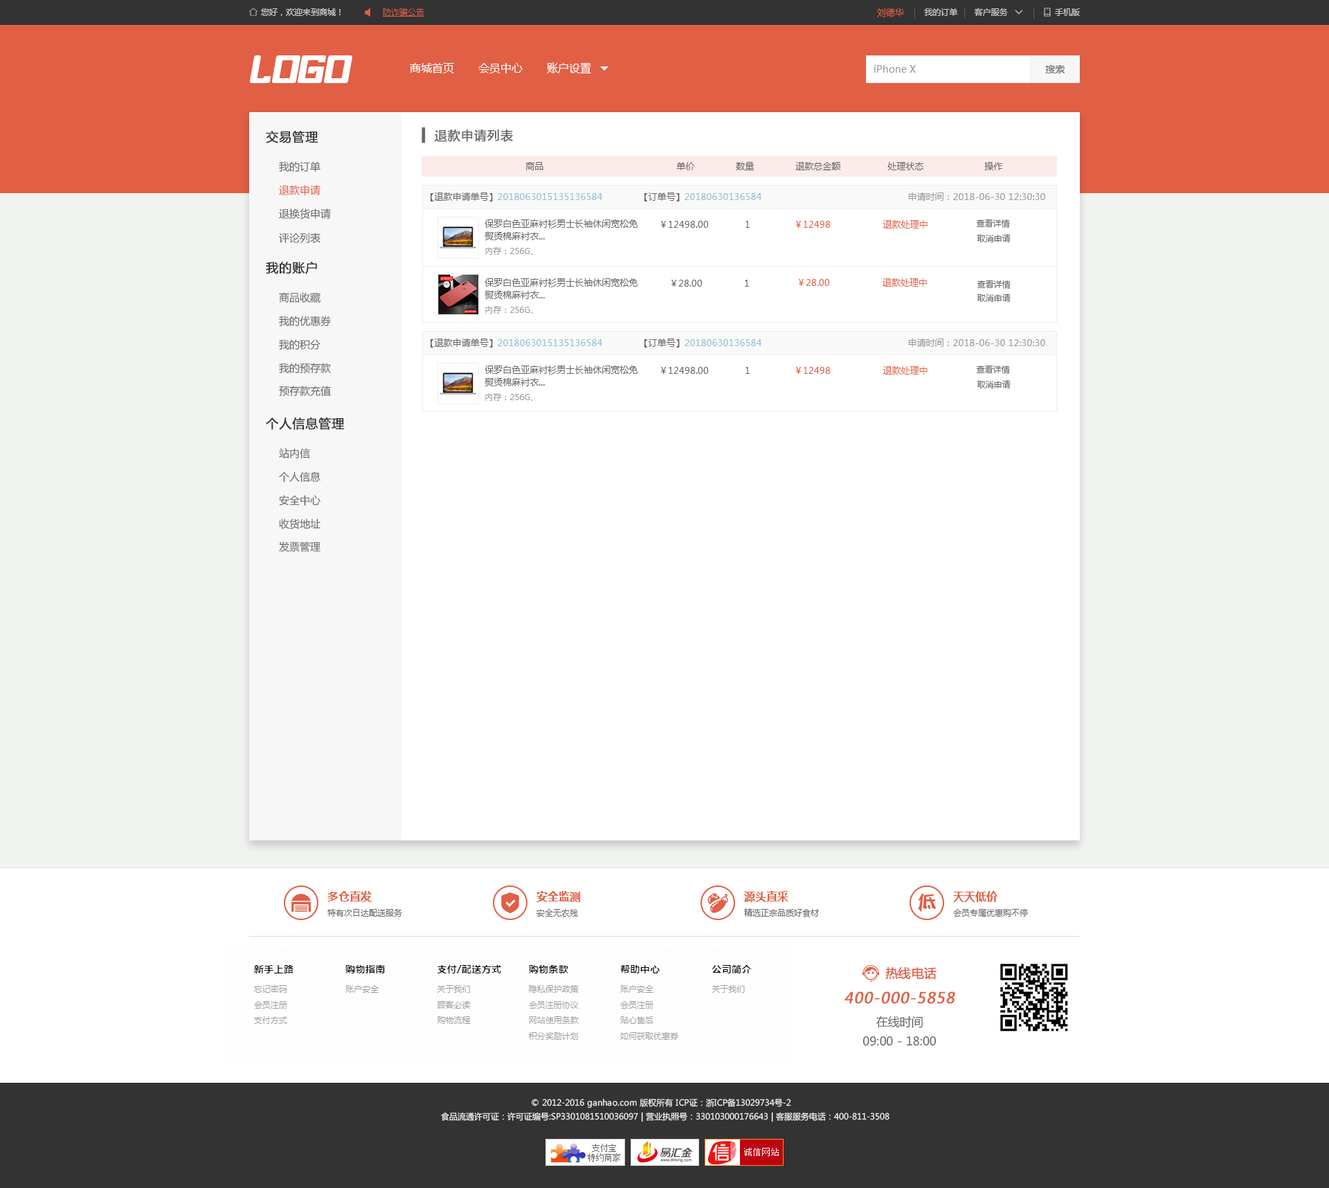
<style>
.page{position:relative;width:1329px;height:1188px;background:#ffffff}
.page>*{position:absolute;margin:0}
.t1{font:9px "MicrosoftYaHei";color:#e15f45}
.t2{font:11.1px "MicrosoftYaHei";color:#ffffff}
.t3{font:9.7px "MicrosoftYaHei";color:#999999}
.t4{font:9.7px "MicrosoftYaHei";color:#666666}
.t5{font:12.5px "MicrosoftYaHei";color:#333333;font-weight:bold}
.t6{font:12.5px "MicrosoftYaHei";color:#666666;font-weight:bold}
.t7{font:10.4px "MicrosoftYaHei";color:#666666}
.t8{font:9px "MicrosoftYaHei";color:#666666}
.t9{font:10.4px "MicrosoftYaHei";color:#e15f45}
.t10{font:9px "MicrosoftYaHei";color:#8fc0d5}
.t11{font:9px "MicrosoftYaHei";color:#999999}
.t12{font:9px/12.5px "MicrosoftYaHei";color:#666666}
.t13{font:8.3px "MicrosoftYaHei";color:#666666}
.t14{font:8.3px "MicrosoftYaHei";color:#999999}
.t15{font:11.1px "MicrosoftYaHei-Bold";color:#e15f45}
.t16{font:12.5px "MicrosoftYaHei";color:#e15f45;font-weight:bold}
.t17{font:14.9px "MicrosoftYaHei";color:#e15f45;font-weight:bold;font-style:italic}
.t18{font:11.8px/19.3px "MicrosoftYaHei";color:#666666}
.t19{font:8.3px/13.8px "MicrosoftYaHei";color:#eeeeee}
</style>
<div class="page">
<p class="t1" style="left:877px;top:8px;width:27px;height:9px">刘德华</p>
<p class="t2" style="left:410px;top:62px;width:181px;height:11px">商城首页       会员中心       账户设置</p>
<p class="t3" style="left:874px;top:65px;width:42px;height:8px">iPhone X</p>
<p class="t4" style="left:1045px;top:65px;width:20px;height:8px">搜索</p>
<p class="t5" style="left:266px;top:131px;width:52px;height:12px">交易管理</p>
<p class="t6" style="left:422px;top:127px;width:91px;height:16px">▍ 退款申请列表</p>
<p class="t7" style="left:279px;top:161px;width:42px;height:11px">我的订单</p>
<p class="t8" style="left:525px;top:162px;width:478px;height:8px">商品                                                单价               数量               退款总金额                 处理状态                      操作</p>
<p class="t9" style="left:279px;top:185px;width:42px;height:11px">退款申请</p>
<p class="t10" style="left:431px;top:192px;width:171px;height:9px"><span class="t8">【退款申请单号】</span>2018063015135136584</p>
<p class="t10" style="left:645px;top:192px;width:117px;height:9px"><span class="t8">【订单号】</span>20180630136584</p>
<p class="t11" style="left:909px;top:192px;width:136px;height:9px">申请时间：2018-06-30 12:30:30</p>
<p class="t7" style="left:279px;top:208px;width:52px;height:11px">退换货申请</p>
<p class="t12" style="left:485px;top:219px;width:153px;height:21px">保罗白色亚麻衬衫男士长袖休闲宽松免<br>熨烫棉麻衬衣...</p>
<p class="t8" style="left:661px;top:221px;width:89px;height:7px">￥12498.00             1</p>
<p class="t1" style="left:796px;top:220px;width:132px;height:8px">￥12498                   退款处理中</p>
<p class="t13" style="left:977px;top:219px;width:33px;height:9px">查看详情</p>
<p class="t7" style="left:279px;top:233px;width:42px;height:10px">评论列表</p>
<p class="t13" style="left:977px;top:234px;width:34px;height:8px">取消申请</p>
<p class="t14" style="left:485px;top:247px;width:48px;height:8px">内存：256G、</p>
<p class="t5" style="left:266px;top:262px;width:51px;height:12px">我的账户</p>
<p class="t12" style="left:485px;top:278px;width:153px;height:21px">保罗白色亚麻衬衫男士长袖休闲宽松免<br>熨烫棉麻衬衣...</p>
<p class="t8" style="left:672px;top:280px;width:77px;height:7px">￥28.00               1</p>
<p class="t1" style="left:799px;top:278px;width:128px;height:9px">￥28.00                   退款处理中</p>
<p class="t13" style="left:978px;top:280px;width:33px;height:9px">查看详情</p>
<p class="t7" style="left:279px;top:292px;width:42px;height:11px">商品收藏</p>
<p class="t13" style="left:977px;top:294px;width:34px;height:8px">取消申请</p>
<p class="t7" style="left:279px;top:316px;width:52px;height:10px">我的优惠券</p>
<p class="t14" style="left:485px;top:306px;width:48px;height:8px">内存：256G、</p>
<p class="t7" style="left:279px;top:339px;width:42px;height:11px">我的积分</p>
<p class="t10" style="left:431px;top:339px;width:171px;height:9px"><span class="t8">【退款申请单号】</span>2018063015135136584</p>
<p class="t10" style="left:645px;top:339px;width:117px;height:9px"><span class="t8">【订单号】</span>20180630136584</p>
<p class="t11" style="left:909px;top:339px;width:136px;height:8px">申请时间：2018-06-30 12:30:30</p>
<p class="t7" style="left:279px;top:363px;width:52px;height:10px">我的预存款</p>
<p class="t12" style="left:485px;top:366px;width:153px;height:20px">保罗白色亚麻衬衫男士长袖休闲宽松免<br>熨烫棉麻衬衣...</p>
<p class="t13" style="left:977px;top:366px;width:33px;height:8px">查看详情</p>
<p class="t8" style="left:661px;top:367px;width:89px;height:7px">￥12498.00             1</p>
<p class="t1" style="left:796px;top:366px;width:132px;height:9px">￥12498                   退款处理中</p>
<p class="t7" style="left:279px;top:386px;width:52px;height:11px">预存款充值</p>
<p class="t13" style="left:977px;top:380px;width:34px;height:8px">取消申请</p>
<p class="t14" style="left:485px;top:393px;width:48px;height:8px">内存：256G、</p>
<p class="t5" style="left:266px;top:417px;width:79px;height:13px">个人信息管理</p>
<p class="t7" style="left:279px;top:448px;width:31px;height:11px">站内信</p>
<p class="t7" style="left:279px;top:471px;width:42px;height:12px">个人信息</p>
<p class="t7" style="left:279px;top:495px;width:42px;height:11px">安全中心</p>
<p class="t7" style="left:279px;top:519px;width:42px;height:11px">收货地址</p>
<p class="t7" style="left:279px;top:541px;width:42px;height:11px">发票管理</p>
<p class="t15" style="left:327px;top:891px;width:45px;height:11px">多仓直发</p>
<p class="t15" style="left:537px;top:891px;width:44px;height:11px">安全监测</p>
<p class="t15" style="left:744px;top:891px;width:45px;height:11px">源头直采</p>
<p class="t15" style="left:953px;top:891px;width:45px;height:11px">天天低价</p>
<p class="t13" style="left:327px;top:909px;width:75px;height:8px">特有次日达配送服务</p>
<p class="t13" style="left:537px;top:909px;width:41px;height:8px">安全无农残</p>
<p class="t13" style="left:744px;top:908px;width:75px;height:9px">精选正宗品质好食材</p>
<p class="t13" style="left:953px;top:909px;width:75px;height:8px">会员专属优惠购不停</p>
<p class="t16" style="left:885px;top:967px;width:52px;height:13px">热线电话</p>
<p class="t17" style="left:845px;top:991px;width:110px;height:13px">400-000-5858</p>
<p class="t18" style="left:863px;top:1016px;width:74px;height:30px;text-align:center">在线时间<br>09:00 - 18:00</p>
<p class="t19" style="left:441px;top:1098px;width:449px;height:24px;text-align:center">© 2012-2016 ganhao.com 版权所有 ICP证：浙ICP备13029734号-2   <br>食品流通许可证：许可证编号:SP3301081510036097 | 营业执照号：330103000176643 | 客服服务电话：400-811-3508</p>
</div>
